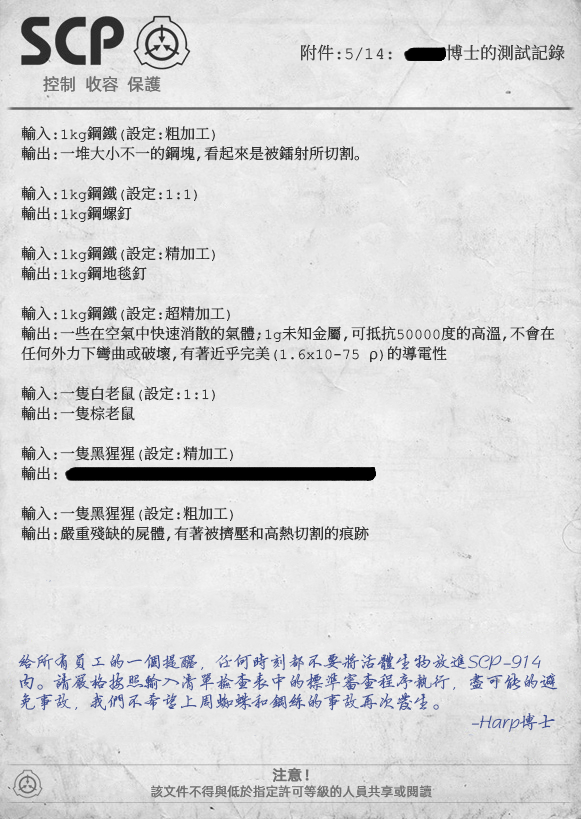
<style>
.page{position:relative;width:581px;height:819px}
.page>*{position:absolute;margin:0}
.t1{font:17px "ContainmentBreach-Regular";color:#434343}
.t2{font:17px "AlibabaPuHuiTiR";color:#707070}
.t3{font:15px/20px "ContainmentBreach-Regular";color:#353535}
.t4{font:18px/20px "FZYBXSFW--GB1-0";color:#32448e}
.t5{font:15px "AlibabaPuHuiTiR";color:#707070;font-weight:bold}
.t6{font:13px "AlibabaPuHuiTiR";color:#707070}
</style>
<div class="page">
<p class="t1" style="left:301px;top:44px;width:264px;height:17px">附件：5/14:     博士的測試記錄</p>
<p class="t2" style="left:43px;top:76px;width:118px;height:16px">控制  收容  保護</p>
<p class="t3" style="left:21px;top:126px;width:534px;height:416px">輸入：1kg鋼鐵（設定：粗加工）<br>輸出：一堆大小不一的鋼塊，看起來是被鐳射所切割。<br><br>輸入：1kg鋼鐵（設定：1:1）<br>輸出：1kg鋼螺釘<br><br>輸入：1kg鋼鐵（設定：精加工）<br>輸出：1kg鋼地毯釘<br><br>輸入：1kg鋼鐵（設定：超精加工）<br>輸出：一些在空氣中快速消散的氣體；1g未知金屬，可抵抗50000度的高溫，不會在<br>任何外力下彎曲或破壞，有著近乎完美（1.6x10-75 ρ）的導電性<br><br>輸入：一隻白老鼠（設定：1:1）<br>輸出：一隻棕老鼠<br><br>輸入：一隻黑猩猩（設定：精加工）<br>輸出：<br><br>輸入：一隻黑猩猩（設定：粗加工）<br>輸出：嚴重殘缺的屍體，有著被擠壓和高熱切割的痕跡</p>
<p class="t4" style="left:18px;top:652px;width:540px;height:80px">给所有员工的一个提醒，任何时刻都不要将活体生物放进SCP-914<br>内。请严格按照输入清单检查表中的标准审查程序执行，尽可能的避<br>免事故，我们不希望上周蜘蛛和钢丝的事故再次发生。<br>                                                                                                   -Harp博士</p>
<p class="t5" style="left:272px;top:767px;width:37px;height:15px">注意！</p>
<p class="t6" style="left:151px;top:785px;width:281px;height:13px">該文件不得與低於指定許可等級的人員共享或閱讀</p>
</div>
